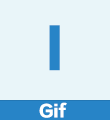
<style>
.page{position:relative;width:110px;height:120px;background:#e9f5f9}
.page>*{position:absolute;margin:0}
.t1{font:52px "FZLTTHK--GBK1-0";color:#2784c7}
.t2{font:16px "FZLTTHK--GBK1-0";color:#ffffff}
</style>
<div class="page">
<p class="t1" style="left:49px;top:25px;width:11px;height:46px">I</p>
<p class="t2" style="left:39px;top:102px;width:28px;height:16px">Gif</p>
</div>
